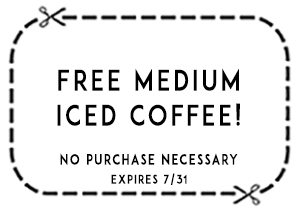
<style>
.page{position:relative;width:300px;height:212px;background:#ffffff}
.page>*{position:absolute;margin:0}
.t1{font:28px/35px "ADAM.CGPRO";letter-spacing:0.125em;color:#000000;scale:0.84 1}
.t2{font:14px "ADAM.CGPRO";letter-spacing:0.125em;color:#000000;scale:0.84 1}
.t3{font:12px "ADAM.CGPRO";letter-spacing:0.125em;color:#000000;scale:0.84 1}
</style>
<div class="page">
<p class="t1" style="left:57px;top:68px;width:183px;height:58px;text-align:center">Free medium<br>Iced coffee!</p>
<p class="t2" style="left:60px;top:153px;width:178px;height:13px">no purchase necessary</p>
<p class="t3" style="left:111px;top:173px;width:76px;height:12px">Expires 7/31</p>
</div>
